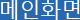
<style>
.page{position:relative;width:80px;height:20px;background:#2868b0}
.page>*{position:absolute;margin:0}
.t1{font:20.8px "MalgunGothic";color:#ffffff}
</style>
<div class="page">
<p class="t1" style="left:1px;top:0px;width:79px;height:20px">메인화면</p>
</div>
